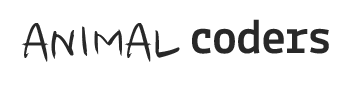
<style>
.page{position:relative;width:359px;height:88px;background:#ffffff}
.page>*{position:absolute;margin:0}
.t1{font:57px "NanumBrush";color:#282828}
.t2{font:50px "Lekton-Bold";color:#282828}
</style>
<div class="page">
<p class="t1" style="left:21px;top:23px;width:159px;height:39px">ANIMAL</p>
<p class="t2" style="left:192px;top:19px;width:137px;height:35px">coders</p>
</div>
